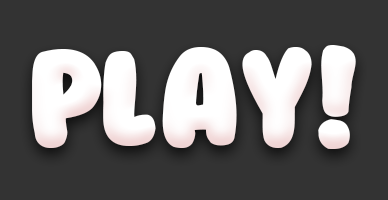
<style>
.page{position:relative;width:388px;height:200px;background:#333333}
.page>*{position:absolute;margin:0}
.t1{font:126.4px "BubbleGum";color:#ffffff}
</style>
<div class="page">
<p class="t1" style="left:32px;top:45px;width:324px;height:104px">PLAY!</p>
</div>
